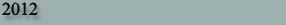
<style>
.page{position:relative;width:286px;height:25px;background:#9db0ae}
.page>*{position:absolute;margin:0}
.t1{font:18px "TimesNewRomanPSMT";color:#060808;font-variant:small-caps}
</style>
<div class="page">
<p class="t1" style="left:2px;top:2px;width:36px;height:13px">2012</p>
</div>
